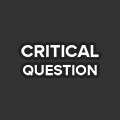
<style>
.page{position:relative;width:120px;height:120px;background:#333333}
.page>*{position:absolute;margin:0}
.t1{font:18px "ProximaNova-Bold";color:#ffffff;text-transform:uppercase}
.t2{font:15px "ProximaNova-Bold";color:#ffffff;text-transform:uppercase}
</style>
<div class="page">
<p class="t1" style="left:21px;top:45px;width:78px;height:31px;text-align:center">Critical<br><span class="t2">Question</span></p>
</div>
